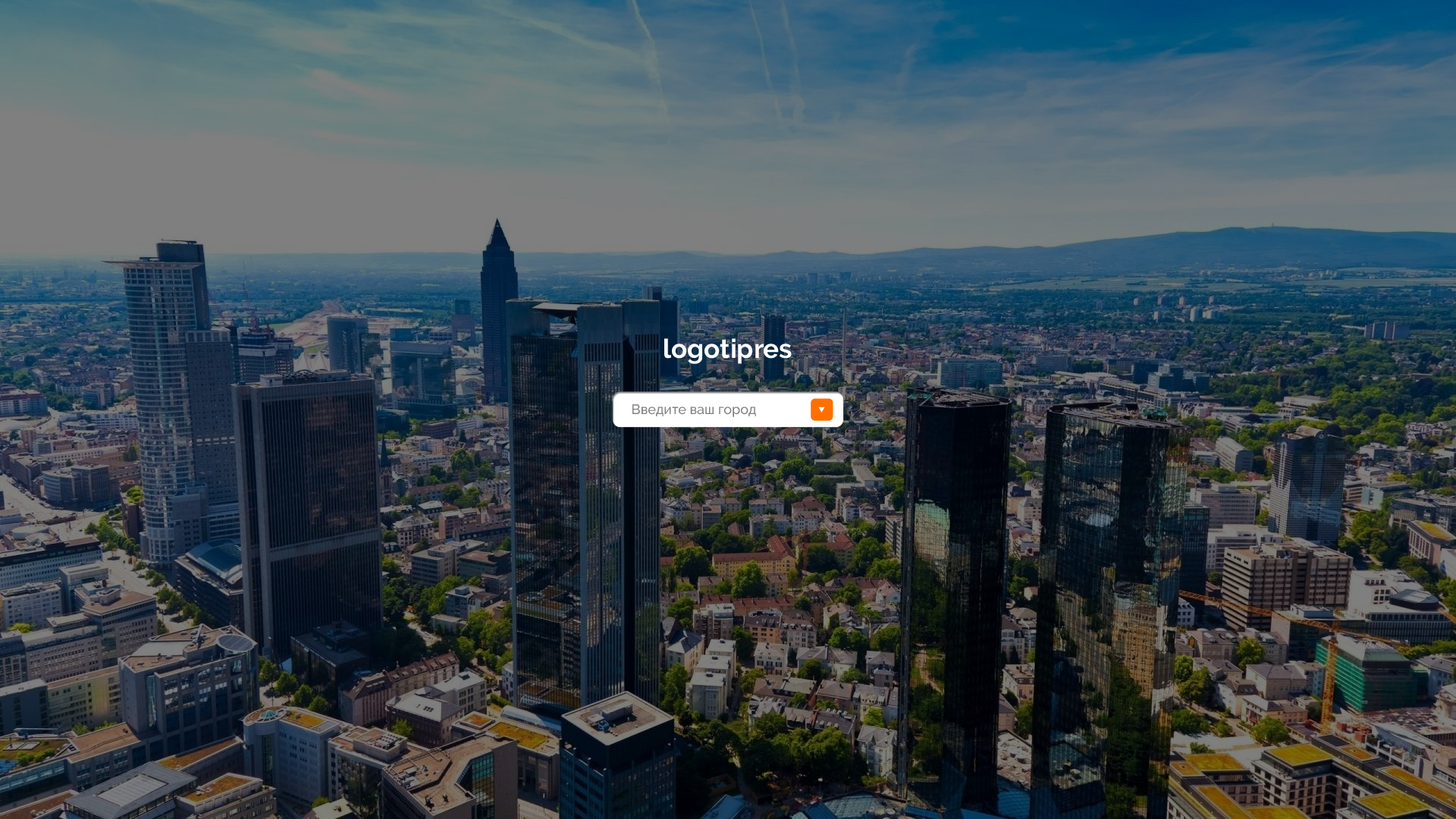
<style>
.page{position:relative;width:1456px;height:819px}
.page>*{position:absolute;margin:0}
.t1{font:26.5px "Raleway-Bold";color:#fefefe}
.t2{font:13.6px "Raleway-Medium";color:#808080}
</style>
<div class="page">
<p class="t1" style="left:664px;top:338px;width:128px;height:26px">logotipres</p>
<p class="t2" style="left:632px;top:404px;width:124px;height:13px">Введите ваш город</p>
</div>
